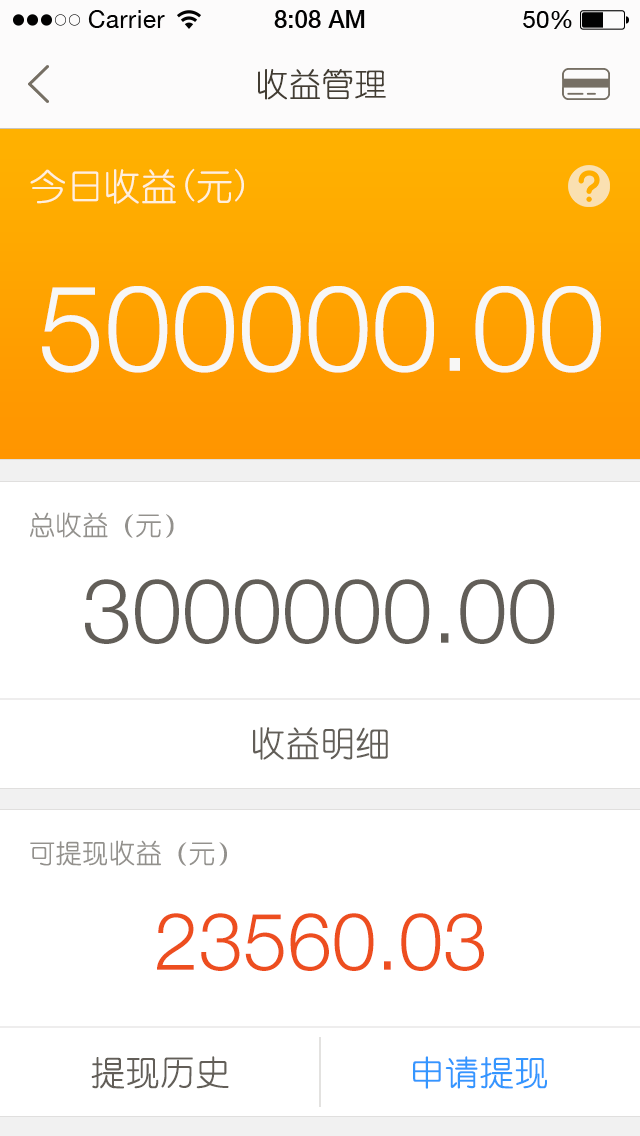
<style>
.page{position:relative;width:640px;height:1136px;background:#ffffff}
.page>*{position:absolute;margin:0}
.t1{font:32px "YouYuan";color:#433d33;text-transform:uppercase;font-weight:bold}
.t2{font:36px "YouYuan";color:#fff0dd;text-transform:uppercase;font-weight:bold}
.t3{font:120px "HelveticaNeueLTPro-Lt";color:#f7f7f6;font-variant:small-caps}
.t4{font:26px "YouYuan";color:#93918d;text-transform:uppercase;font-weight:bold}
.t5{font:90px "HelveticaNeueLTPro-Lt";color:#625e58;text-transform:uppercase}
.t6{font:34px "YouYuan";color:#625e58;text-transform:uppercase;font-weight:bold}
.t7{font:80px "HelveticaNeueLTPro-Lt";color:#ed4e1f;text-transform:uppercase}
.t8{font:34px "YouYuan";color:#3496ff;text-transform:uppercase;font-weight:bold}
</style>
<div class="page">
<p class="t1" style="left:258px;top:69px;width:128px;height:31px">收益管理</p>
<p class="t2" style="left:30px;top:168px;width:214px;height:36px">今日收益(元)</p>
<p class="t3" style="left:42px;top:286px;width:559px;height:87px">500000.00</p>
<p class="t4" style="left:30px;top:512px;width:144px;height:26px">总收益（元）</p>
<p class="t5" style="left:85px;top:579px;width:470px;height:65px">3000000.00</p>
<p class="t6" style="left:253px;top:727px;width:135px;height:33px">收益明细</p>
<p class="t4" style="left:30px;top:840px;width:197px;height:26px">可提现收益（元）</p>
<p class="t7" style="left:157px;top:913px;width:327px;height:58px">23560.03</p>
<p class="t6" style="left:91px;top:1056px;width:138px;height:33px">提现历史</p>
<p class="t8" style="left:413px;top:1056px;width:134px;height:33px">申请提现</p>
</div>
